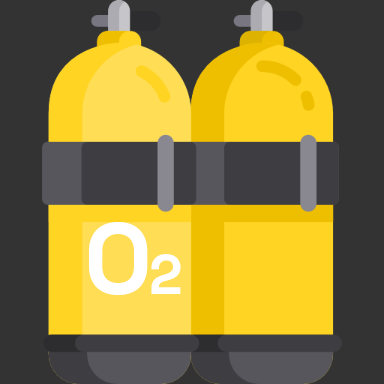
<style>
.page{position:relative;width:384px;height:384px;background:#333333}
.page>*{position:absolute;margin:0}
.t1{font:101.1px "SpaceGrotesk-Bold";color:#ffffff}
.t2{font:56px "SpaceGrotesk-Bold";color:#ffffff}
</style>
<div class="page">
<p class="t1" style="left:89px;top:222px;width:92px;height:73px">O<span class="t2">2</span></p>
</div>
